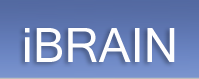
<style>
.page{position:relative;width:199px;height:79px}
.page>*{position:absolute;margin:0}
.t1{font:72px "Vrinda";color:#fefefe}
</style>
<div class="page">
<p class="t1" style="left:25px;top:28px;width:150px;height:34px">iBRAIN</p>
</div>
